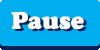
<style>
.page{position:relative;width:100px;height:50px;background:#00aef0}
.page>*{position:absolute;margin:0}
.t1{font:25px "CooperBlack";color:#fefefe}
.t2{font:25px "CooperBlack"}
</style>
<div class="page">
<p class="t1" style="left:11px;top:11px;width:73px;height:19px">Pause</p>
<p class="t2" style="left:14px;top:13px;width:73px;height:19px">Pause</p>
</div>
